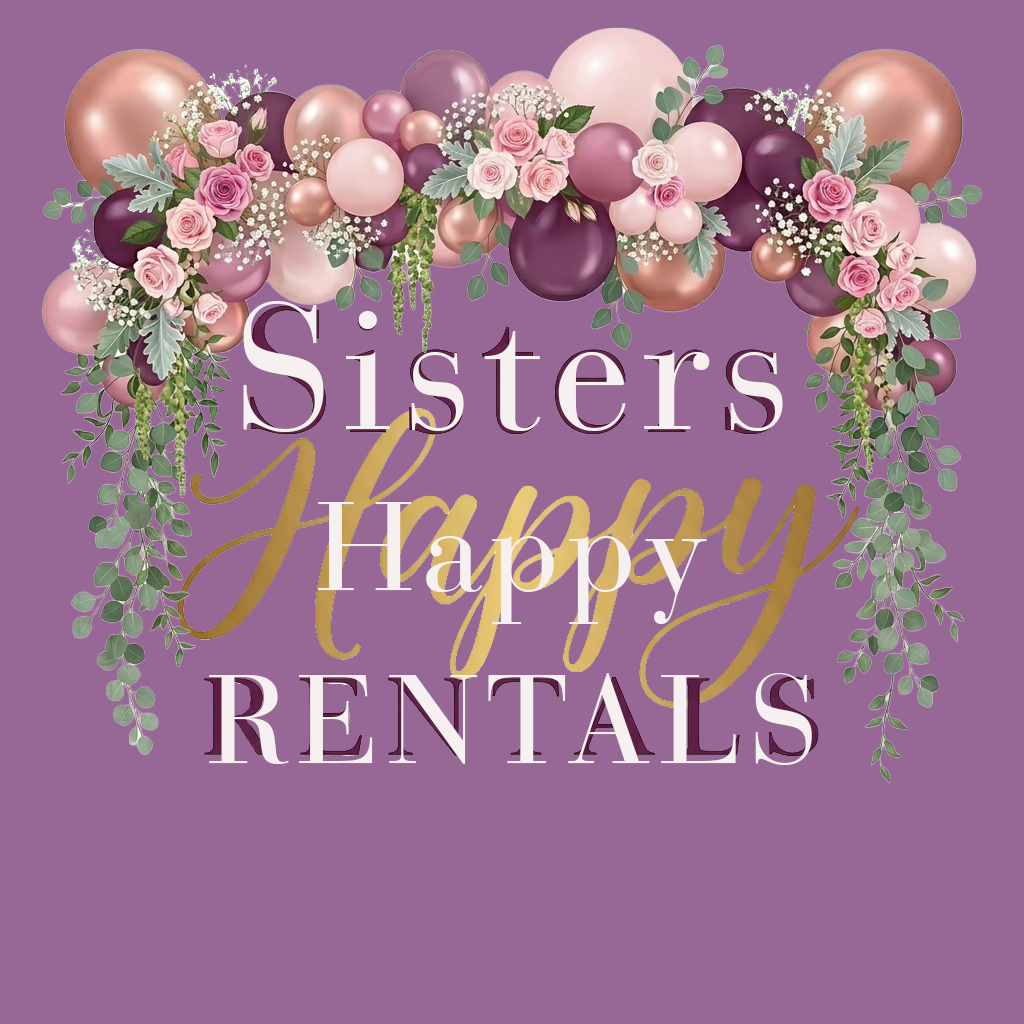
<style>
.page{position:relative;width:1024px;height:1024px;background:#976796}
.page>*{position:absolute;margin:0}
.t1{font:177.5px "BauerBodoniLT-Roman";letter-spacing:0.06em;color:#f6f0f0}
.t2{font:125px "BauerBodoniLT-Roman";letter-spacing:0.06em;color:#f6f0f0}
</style>
<div class="page">
<p class="t1" style="left:243px;top:301px;width:540px;height:131px">Sisters</p>
<p class="t2" style="left:318px;top:502px;width:389px;height:122px">Happy</p>
<p class="t2" style="left:209px;top:673px;width:603px;height:92px">RENTALS</p>
</div>
